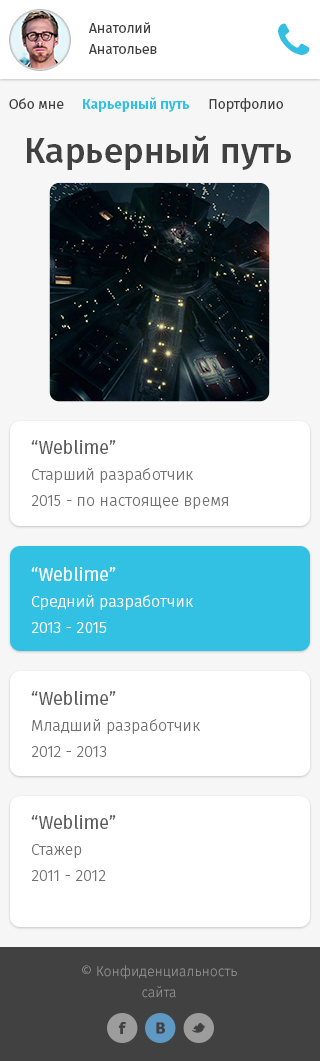
<style>
.page{position:relative;width:320px;height:1061px;background:#ffffff}
.page>*{position:absolute;margin:0}
.t1{font:14px/21px "FiraSans-Regular";color:#414141}
.t2{font:14px "FiraSans-Regular";color:#414141}
.t3{font:14px "FiraSans-Bold";color:#33c1e3}
.t4{font:35px "FiraSans-Medium";color:#414141}
.t5{font:16px/26px "FiraSans-Light";color:#727272}
.t6{font:18px/26px "FiraSans-Regular";color:#5a5a5a}
.t7{font:16px/26px "FiraSans-Light";color:#ffffff}
.t8{font:18px/26px "FiraSans-Regular";color:#ffffff}
.t9{font:14.1px/21.1px "FiraSans-Light";color:#9c9c9c}
</style>
<div class="page">
<p class="t1" style="left:89px;top:22px;width:68px;height:32px">Анатолий<br>Анатольев</p>
<p class="t2" style="left:9px;top:98px;width:55px;height:11px">Обо мне</p>
<p class="t3" style="left:83px;top:97px;width:107px;height:15px">Карьерный путь</p>
<p class="t2" style="left:209px;top:98px;width:74px;height:14px">Портфолио</p>
<p class="t4" style="left:27px;top:135px;width:264px;height:35px">Карьерный путь</p>
<p class="t5" style="left:31px;top:440px;width:197px;height:69px"><span class="t6">“Weblime”<br></span>Старший разработчик<br>2015 - по настоящее время</p>
<p class="t7" style="left:31px;top:567px;width:162px;height:66px"><span class="t8">“Weblime”<br></span>Средний разработчик<br>2013 - 2015</p>
<p class="t5" style="left:31px;top:691px;width:169px;height:66px"><span class="t6">“Weblime”<br></span>Младший разработчик<br>2012 - 2013</p>
<p class="t5" style="left:31px;top:815px;width:85px;height:66px"><span class="t6">“Weblime”<br></span>Стажер<br>2011 - 2012</p>
<p class="t9" style="left:82px;top:965px;width:155px;height:33px;text-align:center">© Конфиденциальность<br>сайта</p>
</div>
